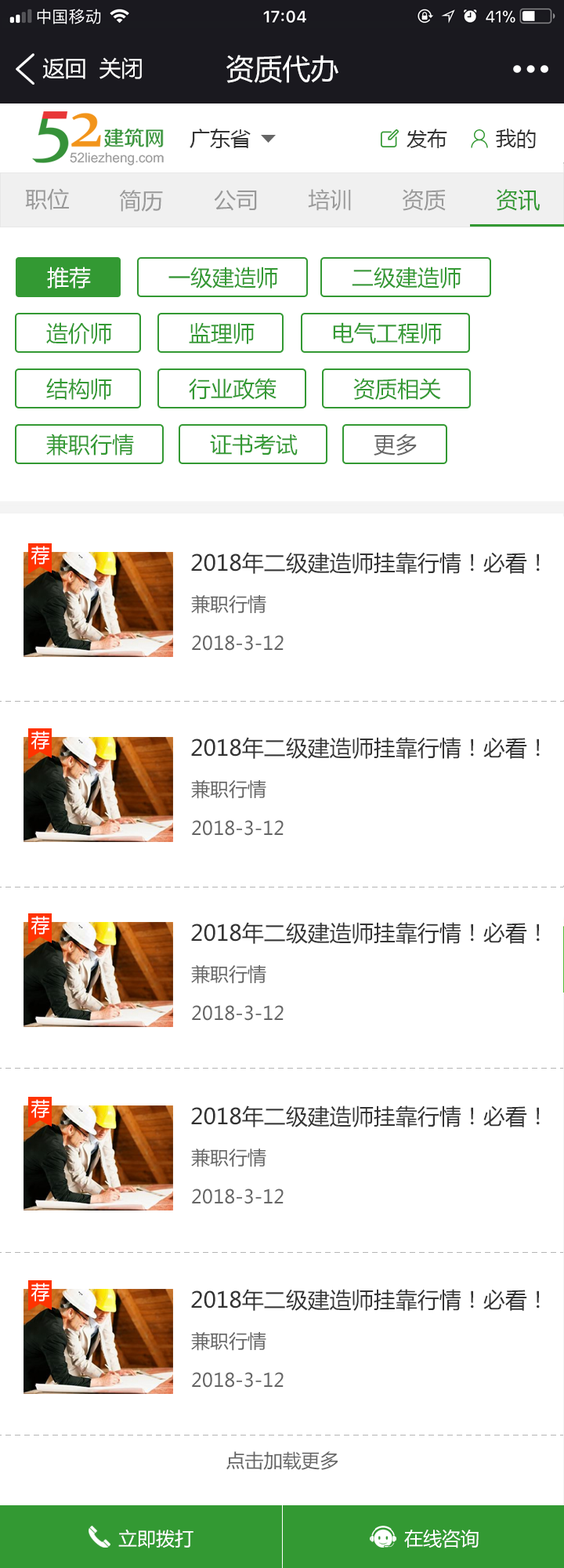
<style>
.page{position:relative;width:564px;height:1568px;background:#ffffff}
.page>*{position:absolute;margin:0}
.t1{font:22px "MicrosoftYaHei";color:#ffffff}
.t2{font:28.2px "MicrosoftYaHei";color:#ffffff}
.t3{font:20.4px "MicrosoftYaHei";color:#333333}
.t4{font:22px "MicrosoftYaHei";color:#999999}
.t5{font:22px "MicrosoftYaHei";color:#339933}
.t6{font:22px "MicrosoftYaHei";color:#666666}
.t7{font:18.8px "MicrosoftYaHei";color:#ffffff}
.t8{font:22px "MicrosoftYaHei";color:#333333}
.t9{font:18.8px "MicrosoftYaHei";color:#666666}
</style>
<div class="page">
<p class="t1" style="left:42px;top:58px;width:43px;height:21px">返回</p>
<p class="t1" style="left:100px;top:57px;width:42px;height:22px">关闭</p>
<p class="t2" style="left:227px;top:55px;width:112px;height:28px">资质代办</p>
<p class="t3" style="left:190px;top:129px;width:61px;height:19px">广东省</p>
<p class="t3" style="left:407px;top:129px;width:41px;height:19px">发布</p>
<p class="t3" style="left:496px;top:129px;width:40px;height:19px">我的</p>
<p class="t4" style="left:25px;top:188px;width:44px;height:22px">职位</p>
<p class="t4" style="left:119px;top:190px;width:44px;height:22px">简历</p>
<p class="t4" style="left:214px;top:190px;width:43px;height:21px">公司</p>
<p class="t4" style="left:308px;top:189px;width:43px;height:22px">培训</p>
<p class="t4" style="left:402px;top:189px;width:44px;height:22px">资质</p>
<p class="t5" style="left:496px;top:189px;width:44px;height:22px">资讯</p>
<p class="t1" style="left:47px;top:267px;width:44px;height:22px">推荐</p>
<p class="t5" style="left:169px;top:267px;width:109px;height:22px">一级建造师</p>
<p class="t5" style="left:352px;top:267px;width:110px;height:22px">二级建造师</p>
<p class="t5" style="left:46px;top:322px;width:66px;height:22px">造价师</p>
<p class="t5" style="left:189px;top:322px;width:66px;height:22px">监理师</p>
<p class="t5" style="left:333px;top:322px;width:109px;height:22px">电气工程师</p>
<p class="t5" style="left:46px;top:378px;width:66px;height:22px">结构师</p>
<p class="t5" style="left:189px;top:378px;width:88px;height:22px">行业政策</p>
<p class="t5" style="left:354px;top:378px;width:87px;height:22px">资质相关</p>
<p class="t5" style="left:46px;top:434px;width:88px;height:22px">兼职行情</p>
<p class="t5" style="left:210px;top:434px;width:88px;height:22px">证书考试</p>
<p class="t6" style="left:374px;top:434px;width:43px;height:22px">更多</p>
<p class="t7" style="left:31px;top:546px;width:18px;height:18px">荐</p>
<p class="t8" style="left:191px;top:552px;width:349px;height:22px">2018年二级建造师挂靠行情！必看！</p>
<p class="t9" style="left:191px;top:595px;width:76px;height:19px">兼职行情</p>
<p class="t9" style="left:192px;top:635px;width:92px;height:16px">2018-3-12</p>
<p class="t7" style="left:31px;top:731px;width:18px;height:19px">荐</p>
<p class="t8" style="left:191px;top:737px;width:349px;height:22px">2018年二级建造师挂靠行情！必看！</p>
<p class="t9" style="left:191px;top:780px;width:76px;height:19px">兼职行情</p>
<p class="t9" style="left:192px;top:820px;width:92px;height:16px">2018-3-12</p>
<p class="t7" style="left:31px;top:916px;width:18px;height:19px">荐</p>
<p class="t8" style="left:191px;top:922px;width:349px;height:22px">2018年二级建造师挂靠行情！必看！</p>
<p class="t9" style="left:191px;top:965px;width:76px;height:19px">兼职行情</p>
<p class="t9" style="left:192px;top:1005px;width:92px;height:16px">2018-3-12</p>
<p class="t7" style="left:31px;top:1099px;width:18px;height:19px">荐</p>
<p class="t8" style="left:191px;top:1105px;width:349px;height:22px">2018年二级建造师挂靠行情！必看！</p>
<p class="t9" style="left:191px;top:1149px;width:76px;height:18px">兼职行情</p>
<p class="t9" style="left:192px;top:1189px;width:92px;height:15px">2018-3-12</p>
<p class="t7" style="left:31px;top:1283px;width:18px;height:18px">荐</p>
<p class="t8" style="left:191px;top:1289px;width:349px;height:22px">2018年二级建造师挂靠行情！必看！</p>
<p class="t9" style="left:191px;top:1332px;width:76px;height:19px">兼职行情</p>
<p class="t9" style="left:192px;top:1372px;width:92px;height:16px">2018-3-12</p>
<p class="t9" style="left:227px;top:1451px;width:111px;height:19px">点击加载更多</p>
<p class="t7" style="left:118px;top:1529px;width:76px;height:19px">立即拨打</p>
<p class="t7" style="left:405px;top:1530px;width:74px;height:18px">在线咨询</p>
</div>
